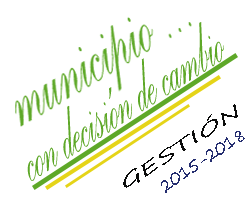
<style>
.page{position:relative;width:250px;height:200px;background:#ffffff}
.page>*{position:absolute;margin:0}
.t1{font:103.1px "PalaceScriptMT";color:#5ea828;scale:0.46 1}
.t2{font:16.7px "SegoePrint";color:#0b0c0b;scale:1.79 1}
.t3{font:18px "SegoePrint";color:#242d6f;scale:0.85 1}
</style>
<div class="page">
<p class="t1" style="left:27px;top:22px;width:197px;height:159px;rotate:-32deg">con decisión de cambio</p>
<p class="t2" style="left:123px;top:104px;width:115px;height:84px;rotate:-33deg">GESTIÓN</p>
<p class="t3" style="left:161px;top:131px;width:84px;height:62px;rotate:-34deg">2015-2018</p>
</div>
